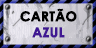
<style>
.page{position:relative;width:96px;height:48px}
.page>*{position:absolute;margin:0}
.t1{font:13.3px/16px "CenturyGothic-Bold";letter-spacing:0.005em;color:#000000;text-transform:uppercase;font-weight:bold}
.t2{font:13.3px/16px "CenturyGothic-Bold";letter-spacing:0.005em;color:#401892;text-transform:uppercase;font-weight:bold}
</style>
<div class="page">
<p class="t1" style="left:20px;top:8px;width:57px;height:30px;text-align:center">CARTÃO<br><span class="t2">AZUL</span></p>
</div>
